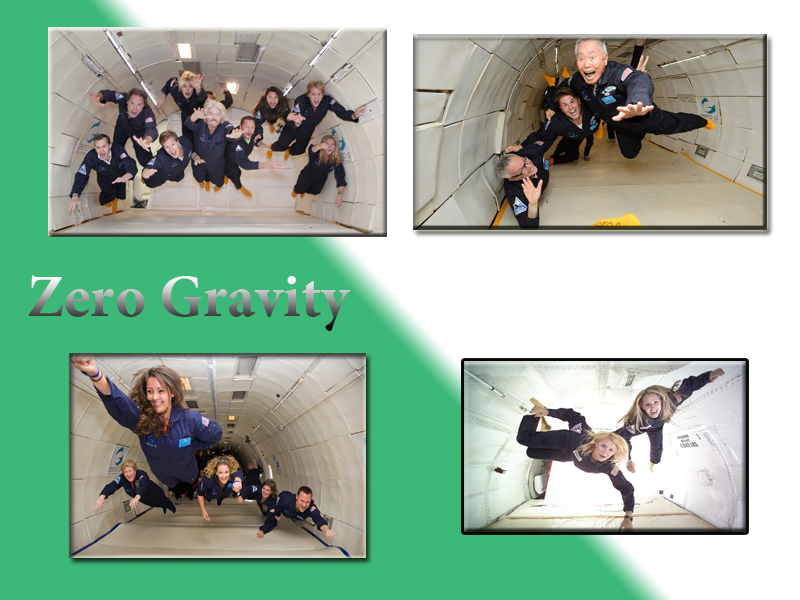
<style>
.page{position:relative;width:800px;height:600px;background:#ffffff}
.page>*{position:absolute;margin:0}
.t1{font:60px "MinionPro-Bold"}
</style>
<div class="page">
<p class="t1" style="left:28px;top:275px;width:322px;height:56px">Zero Gravity</p>
</div>
